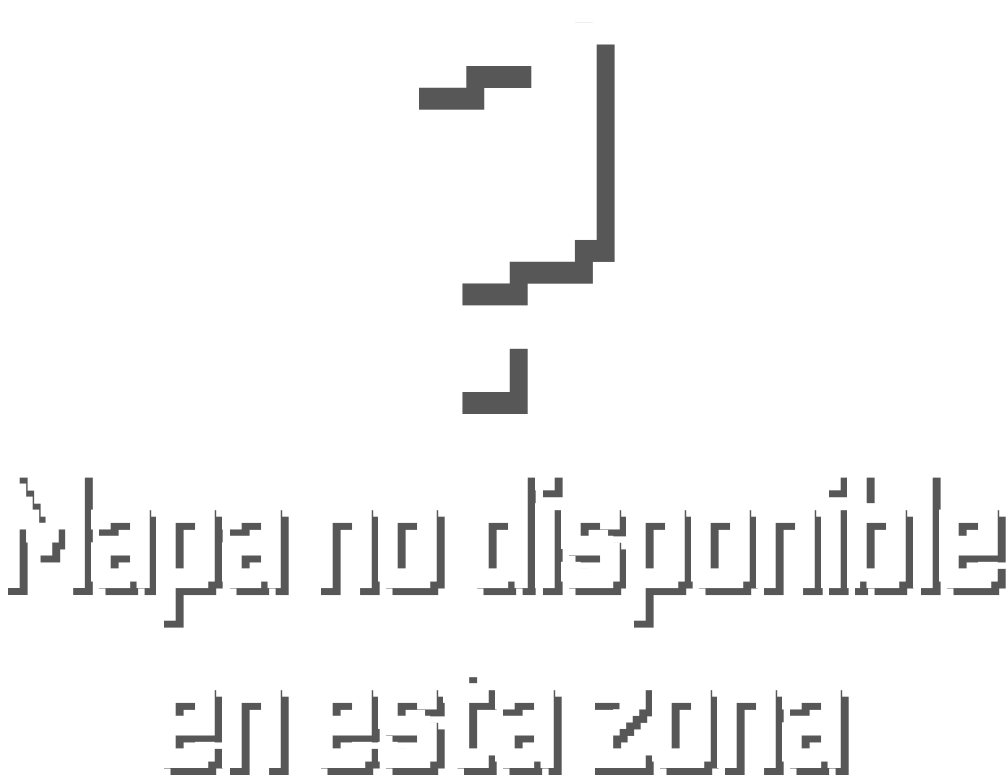
<style>
.page{position:relative;width:1006px;height:775px;background:#ffffff}
.page>*{position:absolute;margin:0}
.t1{font:500px "Hannover-Messe-Sans"}
.t2{font:150px "Hannover-Messe-Sans"}
</style>
<div class="page">
<p class="t1" style="left:419px;top:22px;width:196px;height:392px">?</p>
<p class="t2" style="left:8px;top:477px;width:998px;height:298px;text-align:center">Mapa no disponible<br>en esta zona</p>
</div>
